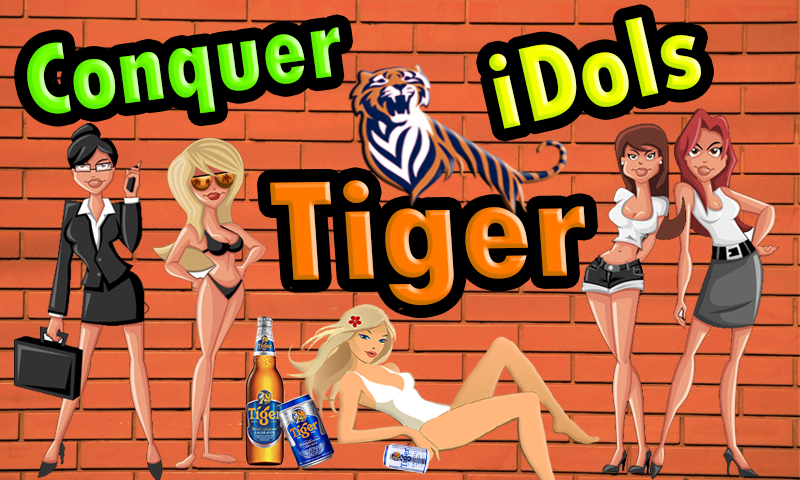
<style>
.page{position:relative;width:800px;height:480px}
.page>*{position:absolute;margin:0}
.t1{font:113.1px "TwCenMT-CondensedExtraBold"}
.t2{font:103.4px "TwCenMT-CondensedExtraBold"}
.t3{font:149.4px "TwCenMT-CondensedExtraBold";scale:1.13 1}
</style>
<div class="page">
<p class="t1" style="left:489px;top:17px;width:212px;height:112px;rotate:-13deg">iDols</p>
<p class="t2" style="left:27px;top:27px;width:314px;height:87px;rotate:-7deg">Conquer</p>
<p class="t3" style="left:270px;top:180px;width:315px;height:126px;rotate:-1deg">Tiger</p>
</div>
